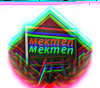
<style>
.page{position:relative;width:100px;height:88px;background:#ffffff}
.page>*{position:absolute;margin:0}
.t1{font:12px "MyriadPro-It";letter-spacing:0.075em;color:#d24027}
</style>
<div class="page">
<p class="t1" style="left:29px;top:37px;width:44px;height:9px;rotate:2deg">мектеп</p>
</div>
